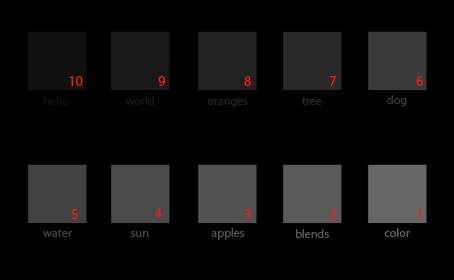
<style>
.page{position:relative;width:454px;height:280px;background:#000000}
.page>*{position:absolute;margin:0}
.t1{font:14px "MyriadPro-Regular";color:#ed1e24}
.t2{font:12px "MyriadPro-Regular";color:#292929}
.t3{font:12px "MyriadPro-Regular";color:#3a3a3a}
.t4{font:14px "MyriadPro-Regular";color:#ed2024}
.t5{font:12px "MyriadPro-Regular";color:#424242}
.t6{font:12px "MyriadPro-Regular";color:#4a4a4a}
.t7{font:12px "MyriadPro-Regular";color:#525252}
.t8{font:12px "MyriadPro-Regular";color:#595959}
.t9{font:12px "MyriadPro-Regular";color:#666666}
</style>
<div class="page">
<p class="t1" style="left:69px;top:76px;width:14px;height:10px">10</p>
<p class="t1" style="left:158px;top:76px;width:7px;height:10px">9</p>
<p class="t1" style="left:244px;top:76px;width:7px;height:10px">8</p>
<p class="t1" style="left:330px;top:76px;width:6px;height:10px">7</p>
<p class="t1" style="left:416px;top:76px;width:7px;height:10px">6</p>
<p class="t2" style="left:302px;top:97px;width:20px;height:8px">tree</p>
<p class="t3" style="left:387px;top:95px;width:20px;height:11px">dog</p>
<p class="t4" style="left:71px;top:209px;width:7px;height:10px">5</p>
<p class="t1" style="left:155px;top:208px;width:7px;height:10px">4</p>
<p class="t1" style="left:244px;top:209px;width:7px;height:10px">3</p>
<p class="t1" style="left:329px;top:209px;width:7px;height:10px">2</p>
<p class="t1" style="left:417px;top:209px;width:4px;height:10px">1</p>
<p class="t5" style="left:43px;top:229px;width:29px;height:8px">water</p>
<p class="t6" style="left:130px;top:231px;width:19px;height:6px">sun</p>
<p class="t7" style="left:211px;top:228px;width:34px;height:12px">apples</p>
<p class="t8" style="left:296px;top:229px;width:33px;height:9px">blends</p>
<p class="t9" style="left:384px;top:228px;width:26px;height:9px">color</p>
</div>
